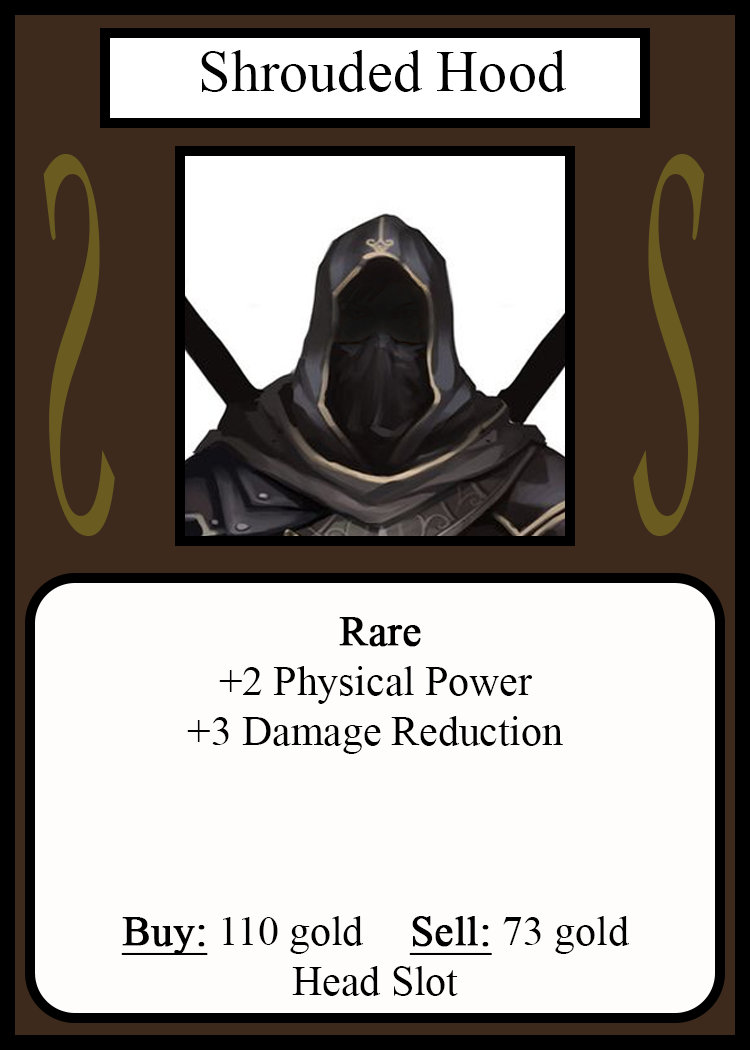
<style>
.page{position:relative;width:750px;height:1050px;background:#fffcfc}
.page>*{position:absolute;margin:0}
.t1{font:58.3px "TimesNewRomanPSMT";color:#010101}
.t2{font:548.5px "Apple-Chancery";color:#6a5c21;scale:0.27 1}
.t3{font:548.2px "Apple-Chancery";color:#6a5c21;scale:0.27 1}
.t4{font:41.7px "TimesNewRomanPSMT";color:#000000}
.t5{font:41.7px "TimesNewRomanPSMT";color:#000000;font-weight:bold}
.t6{font:41.7px "TimesNewRomanPSMT";color:#000000;font-weight:bold;text-decoration:underline}
</style>
<div class="page">
<p class="t1" style="left:201px;top:50px;width:366px;height:42px">Shrouded Hood</p>
<p class="t2" style="left:43px;top:154px;width:72px;height:382px;rotate:180deg">S</p>
<p class="t3" style="left:633px;top:154px;width:72px;height:382px">S</p>
<p class="t4" style="left:121px;top:617px;width:509px;height:379px;text-align:center"><span class="t5">Rare</span><br>+2 Physical Power<br>+3 Damage Reduction<br><br><br><br><span class="t6">Buy:</span> 110 gold   <span class="t6">Sell:</span> 73 gold<br>Head Slot</p>
</div>
